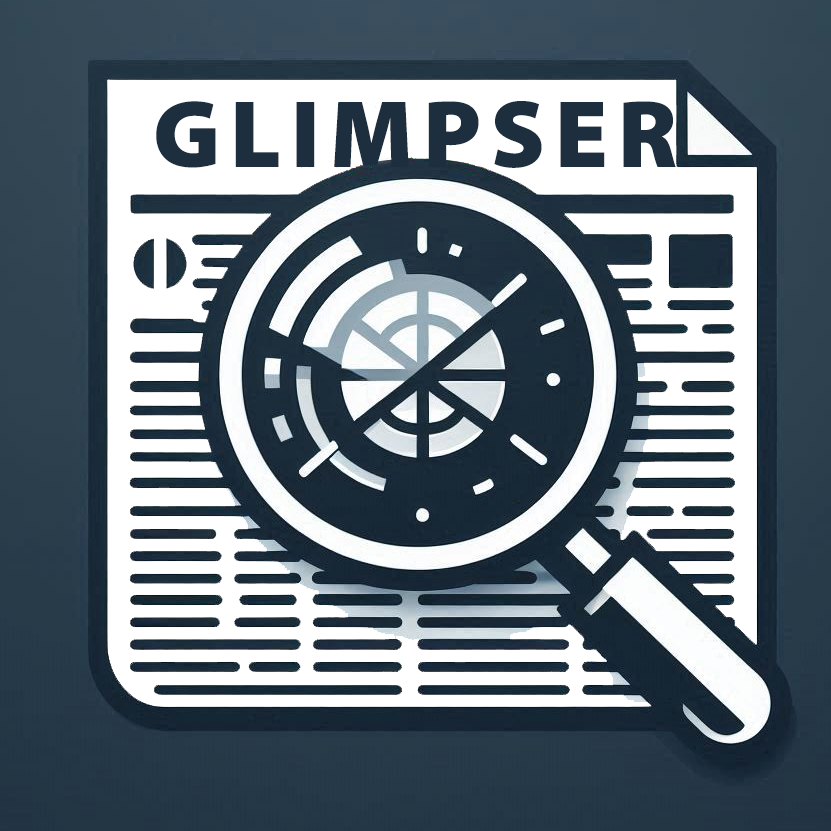
<style>
.page{position:relative;width:831px;height:831px}
.page>*{position:absolute;margin:0}
.t1{font:96px "MyriadConceptRoman-Black";letter-spacing:0.1em;color:#1d2e3e}
</style>
<div class="page">
<p class="t1" style="left:156px;top:101px;width:520px;height:67px">GLIMPSER</p>
</div>
